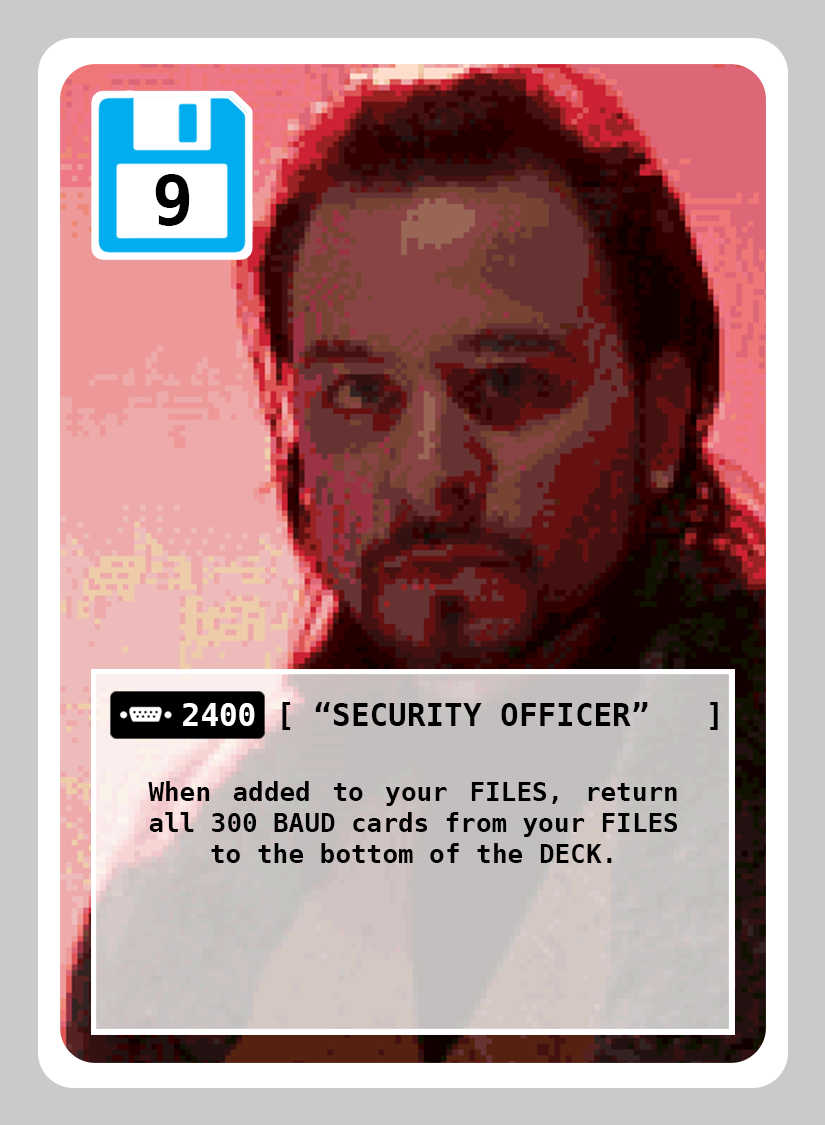
<style>
.page{position:relative;width:825px;height:1125px}
.page>*{position:absolute;margin:0}
.t1{font:69px "DejaVuSansMono-Bold";color:#000000}
.t2{font:31px "DejaVuSansMono-Bold";color:#000000}
.t3{font:31px "DejaVuSansMono-Bold";color:#ffffff}
.t4{font:26px "DejaVuSansMono-Bold";color:#000000}
</style>
<div class="page">
<p class="t1" style="left:155px;top:174px;width:35px;height:52px">9</p>
<p class="t2" style="left:315px;top:702px;width:333px;height:24px">“SECURITY OFFICER”</p>
<p class="t3" style="left:183px;top:703px;width:72px;height:23px">2400</p>
<p class="t4" style="left:148px;top:781px;width:529px;height:82px;text-align:justify">When added to your FILES, return all 300 BAUD cards from your FILES to the bottom of the DECK.</p>
</div>
